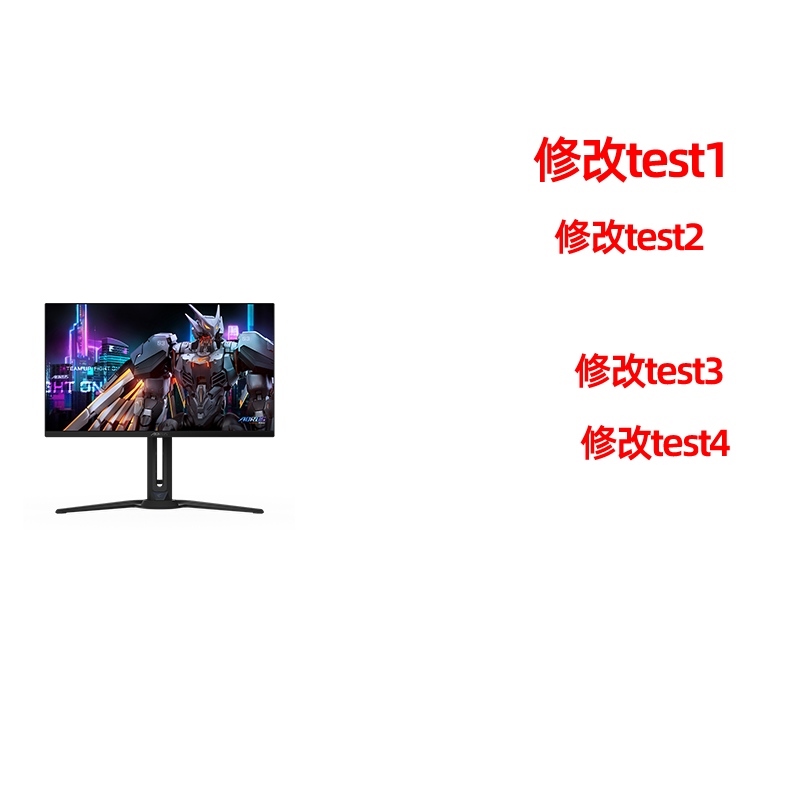
<style>
.page{position:relative;width:800px;height:800px;background:#ffffff}
.page>*{position:absolute;margin:0}
.t1{font:50px "AlibabaPuHuiTi_2_85_Bold";letter-spacing:-0.06em;color:#ff0000}
.t2{font:38px "AlibabaPuHuiTi_2_85_Bold";letter-spacing:-0.06em;color:#ff0000}
</style>
<div class="page">
<p class="t1" style="left:533px;top:136px;width:190px;height:47px">修改test1</p>
<p class="t2" style="left:554px;top:219px;width:150px;height:36px">修改test2</p>
<p class="t2" style="left:574px;top:353px;width:149px;height:36px">修改test3</p>
<p class="t2" style="left:580px;top:425px;width:150px;height:36px">修改test4</p>
</div>
